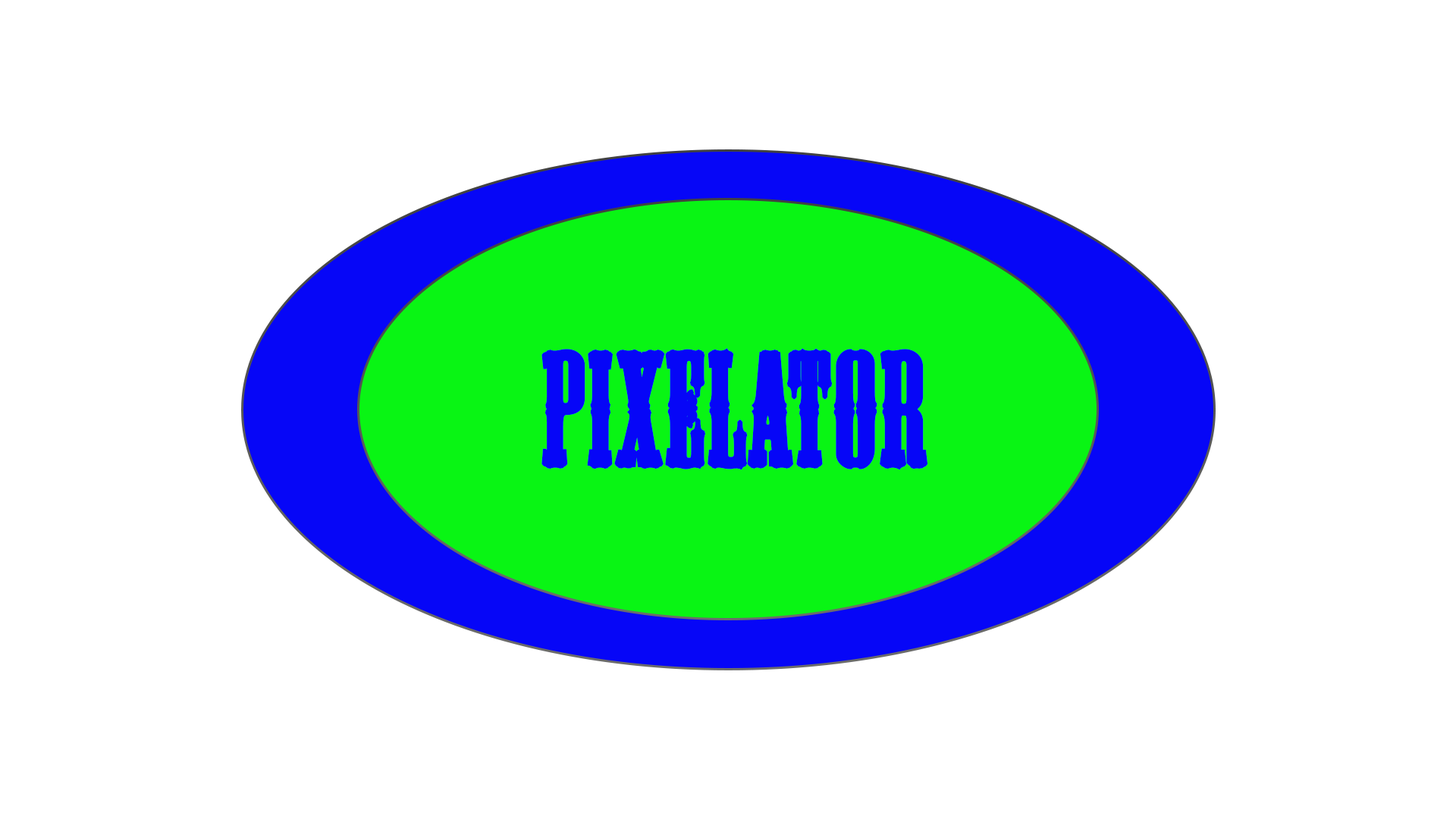
<style>
.page{position:relative;width:1456px;height:819px;background:#ffffff}
.page>*{position:absolute;margin:0}
.t1{font:151.7px "MesquiteStd";color:#0606f7;font-variant:small-caps;font-weight:bold}
</style>
<div class="page">
<p class="t1" style="left:541px;top:348px;width:387px;height:122px">PIXELATOR</p>
</div>
